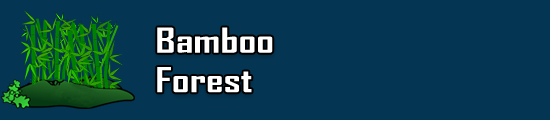
<style>
.page{position:relative;width:550px;height:120px;background:#043654}
.page>*{position:absolute;margin:0}
.t1{font:32.9px "AgencyFB-Bold";color:#ffffff;scale:1.33 1}
</style>
<div class="page">
<p class="t1" style="left:157px;top:27px;width:116px;height:66px">Bamboo <br>Forest</p>
</div>
